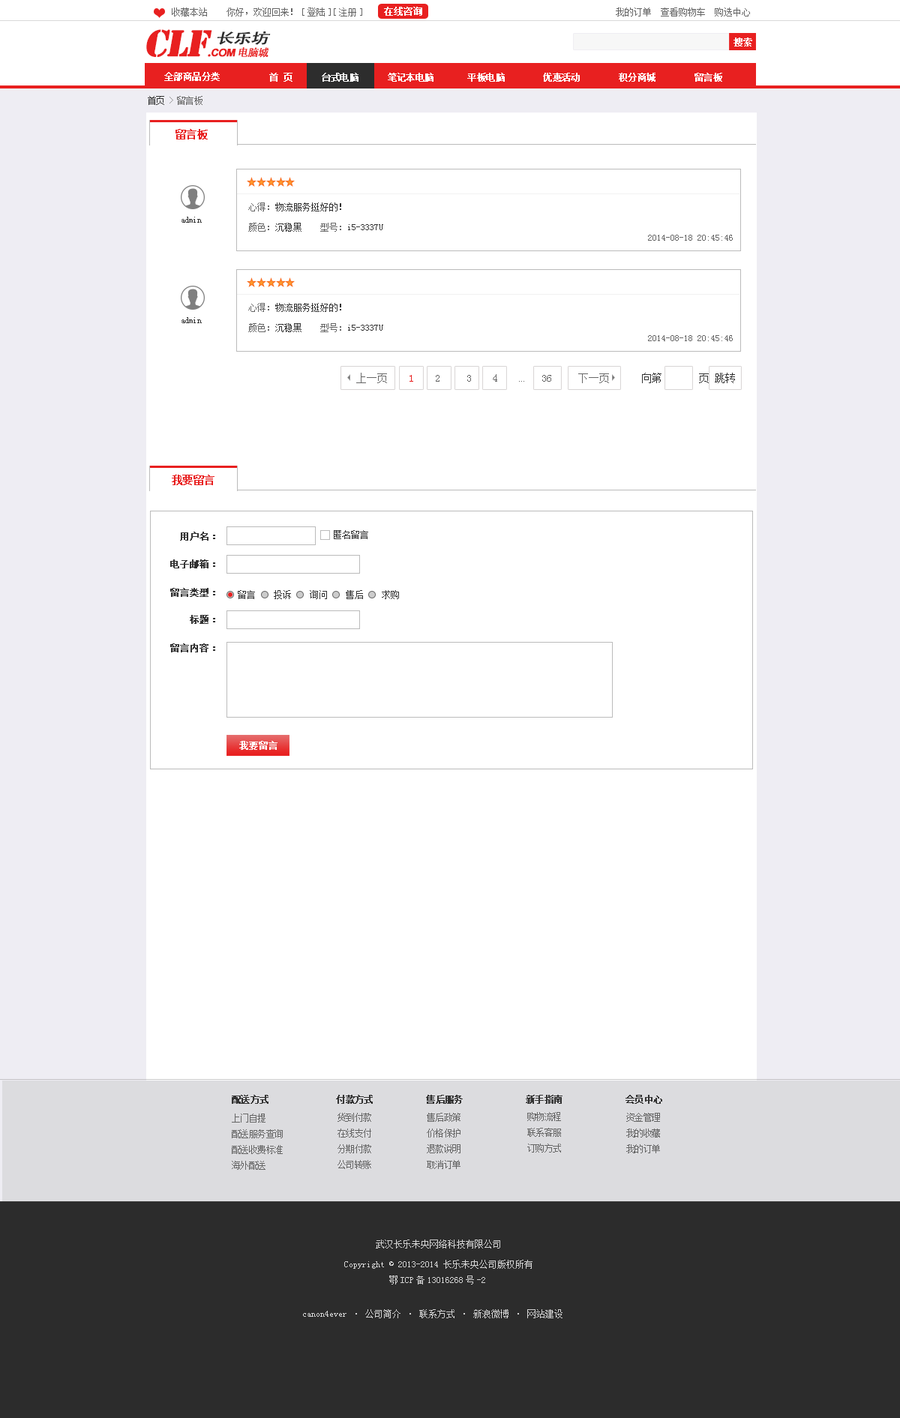
<style>
.page{position:relative;width:900px;height:1418px;background:#ffffff}
.page>*{position:absolute;margin:0}
.t1{font:9px "SimSun";color:#666666}
.t2{font:9px "SimSun";color:#ffffff;font-weight:bold}
.t3{font:34.5px "StencilStd";letter-spacing:-0.05em;color:#e82020;font-weight:bold;font-style:italic}
.t4{font:10.5px "StencilStd";letter-spacing:-0.05em;color:#e82020;font-weight:bold;font-style:italic}
.t5{font:10.5px "Arial-BoldMT";letter-spacing:-0.05em;color:#e82020;font-weight:bold;font-style:italic}
.t6{font:10.5px "AdobeHeitiStd-Regular";letter-spacing:-0.05em;color:#e82020;font-weight:bold;font-style:italic}
.t7{font:14.2px "AdobeHeitiStd-Regular";letter-spacing:-0.05em;color:#2d2d2d;font-weight:bold;font-style:italic;scale:1.26 1}
.t8{font:9px "SimSun";letter-spacing:-0.05em;color:#ffffff;font-weight:bold}
.t9{font:9px "SimSun";letter-spacing:-0.05em;color:#666666}
.t10{font:9px "SimSun";letter-spacing:-0.05em;color:#333333}
.t11{font:9px "SimSun";letter-spacing:-0.05em;color:#999999}
.t12{font:10.5px "SimSun";letter-spacing:-0.05em;color:#e82020;font-weight:bold}
.t13{font:9px "SimSun";color:#333333}
.t14{font:10.5px "SimSun";color:#666666}
.t15{font:10.5px "SimSun";color:#333333}
.t16{font:10.5px "SimSun";color:#e82020}
.t17{font:4.5px "SimSun";color:#666666}
.t18{font:9px "SimSun";color:#333333;font-weight:bold}
.t19{font:9px "SimSun";letter-spacing:-0.05em;color:#333333;font-weight:bold}
.t20{font:9px "SimSun";color:#d4d4d4}
.t21{font:13.5px "MicrosoftYaHei";color:#ffffff;font-weight:bold}
</style>
<div class="page">
<p class="t1" style="left:172px;top:8px;width:35px;height:8px">收藏本站</p>
<p class="t1" style="left:226px;top:8px;width:524px;height:8px">你好，欢迎回来！[登陆][注册]                                                        我的订单  查看购物车  购选中心</p>
<p class="t2" style="left:384px;top:7px;width:38px;height:9px">在线咨询</p>
<p class="t3" style="left:146px;top:29px;width:123px;height:29px">CLF<span class="t4">.</span><span class="t5">COM</span><span class="t6">电脑城</span></p>
<p class="t7" style="left:218px;top:31px;width:53px;height:14px">长乐坊</p>
<p class="t2" style="left:734px;top:38px;width:18px;height:8px">搜索</p>
<p class="t8" style="left:164px;top:72px;width:56px;height:9px">全部商品分类</p>
<p class="t8" style="left:269px;top:73px;width:453px;height:9px">首 页      台式电脑      笔记本电脑       平板电脑        优惠活动        积分商城        留言板</p>
<p class="t9" style="left:148px;top:96px;width:54px;height:9px"><span class="t10">首页 </span><span class="t11">&gt; </span>留言板</p>
<p class="t12" style="left:176px;top:129px;width:32px;height:11px">留言板</p>
<p class="t13" style="left:248px;top:202px;width:93px;height:10px"><span class="t1">心得：</span>物流服务挺好的！</p>
<p class="t10" style="left:182px;top:217px;width:20px;height:6px">admin</p>
<p class="t13" style="left:248px;top:223px;width:135px;height:9px"><span class="t1">颜色：</span>沉稳黑<span class="t1">    型号：</span>i5-3337U</p>
<p class="t1" style="left:648px;top:235px;width:85px;height:6px">2014-08-18 20:45:46</p>
<p class="t13" style="left:248px;top:303px;width:93px;height:9px"><span class="t1">心得：</span>物流服务挺好的！</p>
<p class="t10" style="left:182px;top:317px;width:20px;height:6px">admin</p>
<p class="t13" style="left:248px;top:323px;width:135px;height:9px"><span class="t1">颜色：</span>沉稳黑<span class="t1">    型号：</span>i5-3337U</p>
<p class="t1" style="left:648px;top:335px;width:85px;height:6px">2014-08-18 20:45:46</p>
<p class="t14" style="left:356px;top:373px;width:31px;height:10px">上一页</p>
<p class="t15" style="left:410px;top:373px;width:325px;height:10px"><span class="t16">1</span><span class="t14">    2     3    4    </span><span class="t17">...</span><span class="t14">   36     下一页      </span>向第       页 跳转</p>
<p class="t12" style="left:172px;top:475px;width:42px;height:10px">我要留言</p>
<p class="t18" style="left:180px;top:532px;width:35px;height:9px">用户名：</p>
<p class="t13" style="left:334px;top:530px;width:34px;height:9px">匿名留言</p>
<p class="t18" style="left:170px;top:560px;width:45px;height:8px">电子邮箱：</p>
<p class="t18" style="left:170px;top:588px;width:45px;height:9px">留言类型：</p>
<p class="t13" style="left:238px;top:590px;width:161px;height:9px">留言    投诉    询问    售后    求购</p>
<p class="t18" style="left:190px;top:615px;width:25px;height:9px">标题：</p>
<p class="t18" style="left:170px;top:644px;width:45px;height:8px">留言内容：</p>
<p class="t2" style="left:239px;top:741px;width:39px;height:9px">我要留言</p>
<p class="t19" style="left:232px;top:1095px;width:430px;height:9px">配送方式              付款方式           售后服务             新手指南             会员中心</p>
<p class="t9" style="left:232px;top:1114px;width:51px;height:56px">上门自提<br>配送服务查询<br>配送收费标准<br>海外配送</p>
<p class="t9" style="left:338px;top:1113px;width:33px;height:56px">货到付款<br>在线支付<br>分期付款<br>公司转账</p>
<p class="t9" style="left:427px;top:1113px;width:33px;height:56px">售后政策<br>价格保护<br>退款说明<br>取消订单</p>
<p class="t9" style="left:527px;top:1112px;width:34px;height:41px">购物流程<br>联系客服<br>订购方式</p>
<p class="t9" style="left:626px;top:1113px;width:34px;height:41px">资金管理<br>我的收藏<br>我的订单</p>
<p class="t20" style="left:344px;top:1240px;width:188px;height:45px"><span class="t21">                         </span>武汉长乐未央网络科技有限公司<br>                  Copyright © 2013-2014 长乐未央公司版权所有<br>                            鄂ICP备13016268号-2</p>
<p class="t20" style="left:303px;top:1310px;width:259px;height:8px"><span class="t21">              </span>canon4ever · 公司简介 · 联系方式 · 新浪微博 · 网站建设</p>
</div>
